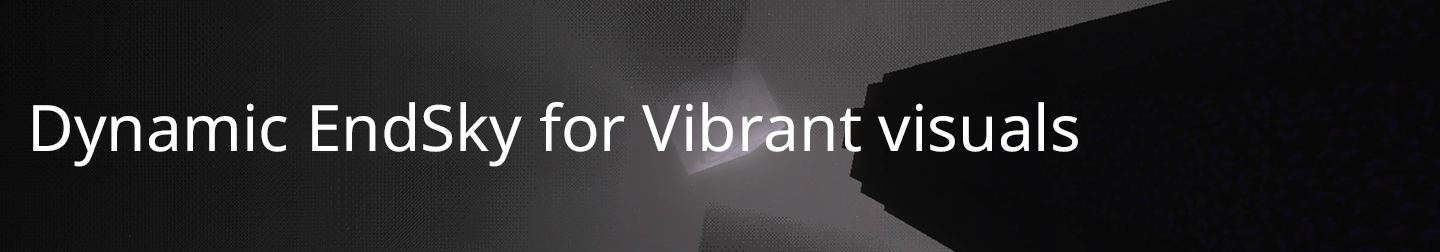
<style>
.page{position:relative;width:1440px;height:252px}
.page>*{position:absolute;margin:0}
.t1{font:64px "NotoSans-Regular";color:#ffffff}
</style>
<div class="page">
<p class="t1" style="left:33px;top:102px;width:1045px;height:65px">Dynamic EndSky for Vibrant visuals</p>
</div>
